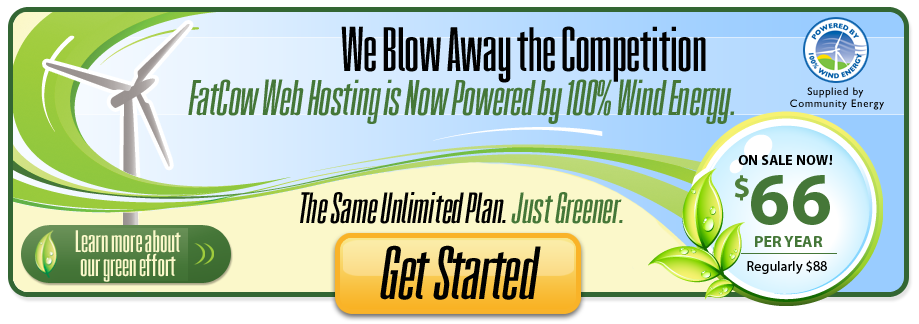
<style>
.page{position:relative;width:919px;height:324px}
.page>*{position:absolute;margin:0}
.t1{font:60px "FatCow";color:#000000}
.t2{font:48px "FatCow-Italic";color:#457738}
.t3{font:42px "FatCow-Italic";color:#000000}
.t4{font:42px "FatCow-Italic";color:#457738}
.t5{font:30px/24px "FatCow";color:#fbf8ca}
.t6{font:72px "FatCow-Italic";color:#000000}
</style>
<div class="page">
<p class="t1" style="left:341px;top:26px;width:365px;height:57px">We Blow Away the Competition</p>
<p class="t2" style="left:188px;top:79px;width:547px;height:45px">FatCow Web Hosting is Now Powered by 100% Wind Energy.</p>
<p class="t3" style="left:300px;top:192px;width:323px;height:32px">The Same Unlimited Plan. <span class="t4">Just Greener.</span></p>
<p class="t5" style="left:75px;top:230px;width:106px;height:52px;text-align:center">Learn more about<br>our green effort</p>
<p class="t6" style="left:380px;top:245px;width:161px;height:55px">Get Started</p>
</div>
